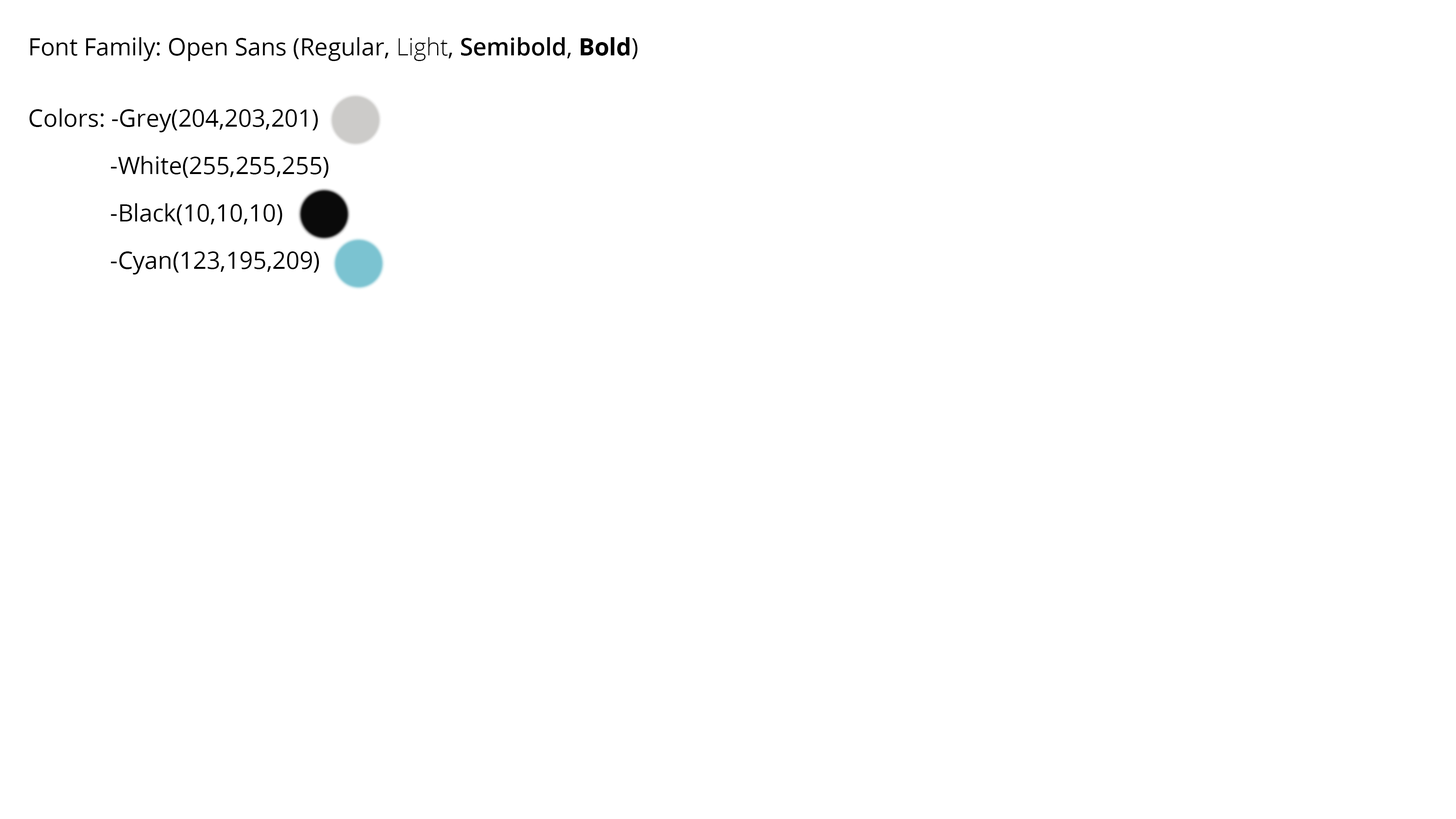
<style>
.page{position:relative;width:1456px;height:819px;background:#ffffff}
.page>*{position:absolute;margin:0}
.t1{font:23.7px "OpenSans";color:#000000}
.t2{font:23.7px "OpenSans-Light";color:#000000}
.t3{font:23.7px "OpenSans-Semibold";color:#000000}
.t4{font:23.7px "OpenSans-Bold";color:#000000}
.t5{font:23.7px/47.4px "OpenSans";color:#000000}
</style>
<div class="page">
<p class="t1" style="left:30px;top:37px;width:608px;height:24px">Font Family: Open Sans (Regular, <span class="t2">Light</span>, <span class="t3">Semibold</span>, <span class="t4">Bold</span>)</p>
<p class="t5" style="left:29px;top:108px;width:300px;height:167px">Colors: -Grey(204,203,201)<br>      -White(255,255,255)<br>      -Black(10,10,10)<br>      -Cyan(123,195,209)</p>
</div>
